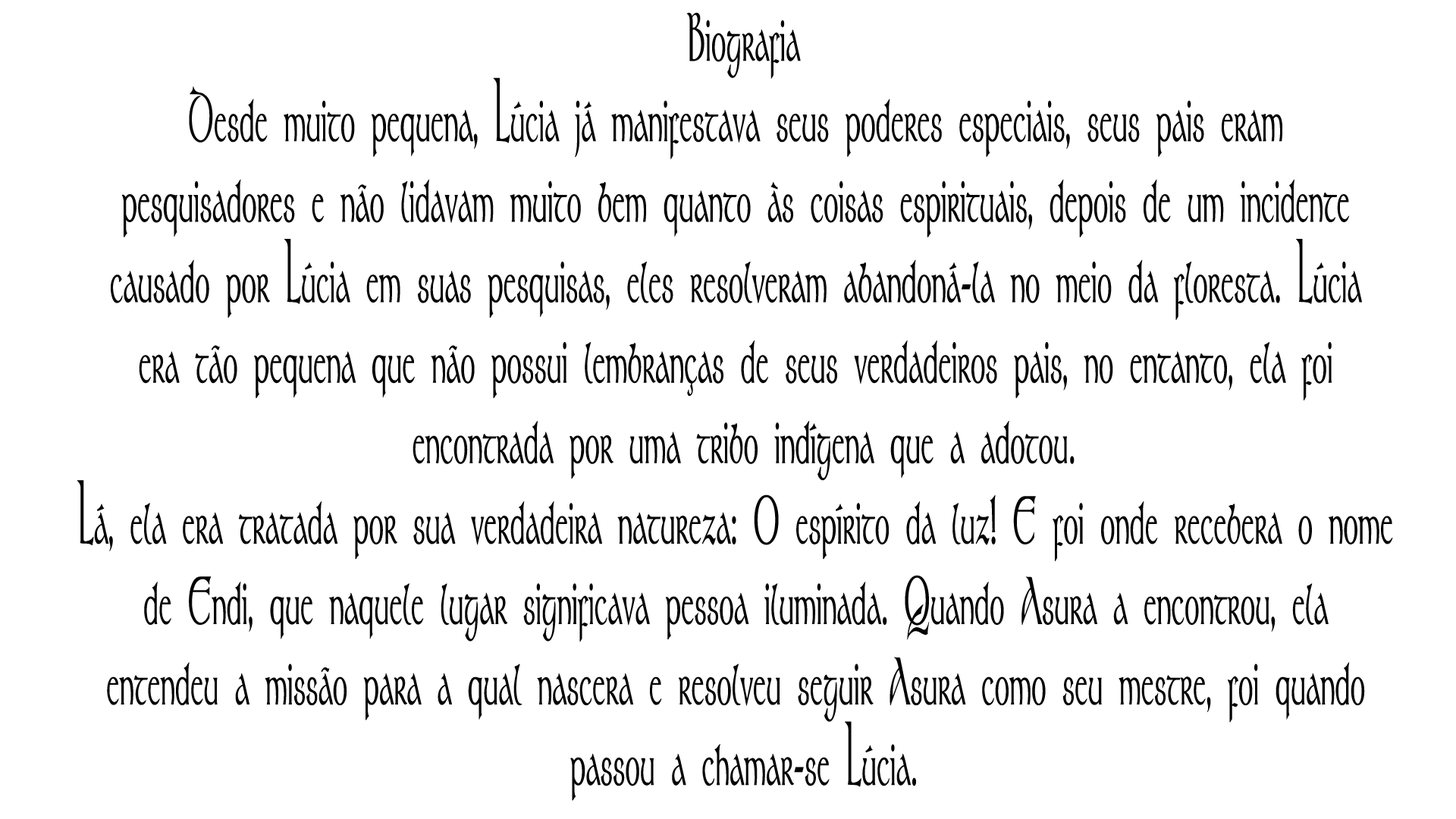
<style>
.page{position:relative;width:1456px;height:819px;background:#ffffff}
.page>*{position:absolute;margin:0}
.t1{font:67.1px "Stonehenge";color:#030303;font-weight:bold;scale:0.45 1}
</style>
<div class="page">
<p class="t1" style="left:77px;top:12px;width:1316px;height:789px;text-align:center">Biografia<br>Desde muito pequena, Lúcia já manifestava seus poderes especiais, seus pais eram <br>pesquisadores e não lidavam muito bem quanto às coisas espirituais, depois de um incidente <br>causado por Lúcia em suas pesquisas, eles resolveram abandoná-la no meio da floresta. Lúcia <br>era tão pequena que não possui lembranças de seus verdadeiros pais, no entanto, ela foi <br>encontrada por uma tribo indígena que a adotou.<br>Lá, ela era tratada por sua verdadeira natureza: O espírito da luz! E foi onde recebera o nome <br>de Endi, que naquele lugar significava pessoa iluminada. Quando Asura a encontrou, ela <br>entendeu a missão para a qual nascera e resolveu seguir Asura como seu mestre, foi quando <br>passou a chamar-se Lúcia.</p>
</div>
